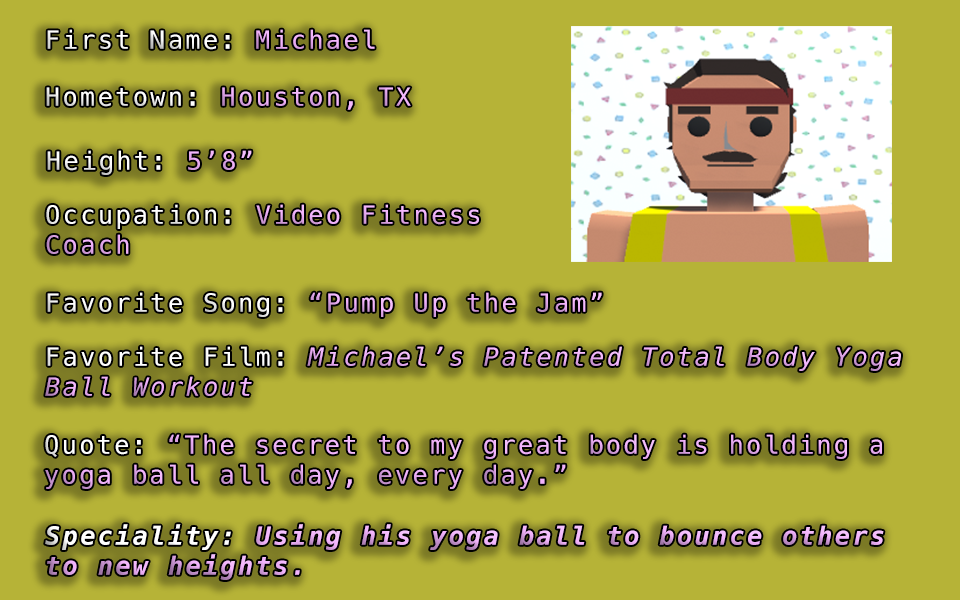
<style>
.page{position:relative;width:960px;height:600px;background:#b6b337}
.page>*{position:absolute;margin:0}
.t1{font:25px "Menlo-Regular";letter-spacing:0.1em;color:#ffffff}
.t2{font:25px "Menlo-Regular";letter-spacing:0.1em;color:#f2b3fc}
.t3{font:25px "Menlo-Italic";letter-spacing:0.1em;color:#f2b3fc}
.t4{font:25px "Menlo-BoldItalic";letter-spacing:0.1em;color:#f2b3fc}
.t5{font:25px "Menlo-BoldItalic";letter-spacing:0.1em;color:#ffffff}
</style>
<div class="page">
<p class="t1" style="left:47px;top:29px;width:328px;height:21px">First Name: <span class="t2">Michael</span></p>
<p class="t2" style="left:46px;top:87px;width:365px;height:23px"><span class="t1">Hometown: </span>Houston, TX</p>
<p class="t1" style="left:47px;top:150px;width:205px;height:25px">Height: <span class="t2">5’8”</span></p>
<p class="t2" style="left:46px;top:204px;width:433px;height:50px"><span class="t1">Occupation: </span>Video Fitness <br>Coach</p>
<p class="t2" style="left:47px;top:292px;width:555px;height:25px"><span class="t1">Favorite Song: </span>“Pump Up the Jam”</p>
<p class="t3" style="left:45px;top:346px;width:856px;height:50px"><span class="t1">Favorite Film: </span>Michael’s Patented Total Body Yoga <br>Ball Workout</p>
<p class="t2" style="left:45px;top:434px;width:837px;height:55px"><span class="t1">Quote: </span>“The secret to my great body is holding a<br>yoga ball all day, every day.”</p>
<p class="t4" style="left:45px;top:524px;width:839px;height:56px"><span class="t5">Speciality: </span>Using his yoga ball to bounce others<br>to new heights.</p>
</div>
